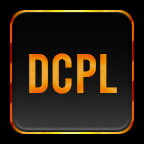
<style>
.page{position:relative;width:144px;height:144px;background:#000000}
.page>*{position:absolute;margin:0}
.t1{font:56px "Bebas-Regular"}
</style>
<div class="page">
<p class="t1" style="left:29px;top:53px;width:88px;height:41px">dcpl</p>
</div>
